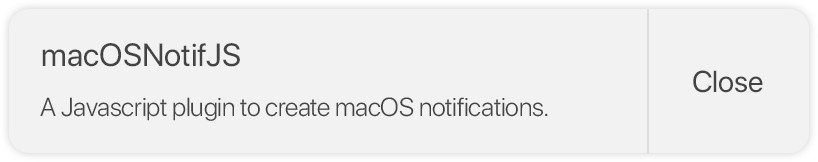
<style>
.page{position:relative;width:818px;height:162px;background:#f2f2f2}
.page>*{position:absolute;margin:0}
.t1{font:32px "SFProDisplay-Regular";color:#444444}
.t2{font:30px "SFProDisplay-Regular";color:#444444}
.t3{font:26px "SFProDisplay-Light";letter-spacing:-0.01em;color:#444444}
</style>
<div class="page">
<p class="t1" style="left:42px;top:43px;width:198px;height:24px">macOSNotifJS</p>
<p class="t2" style="left:693px;top:70px;width:70px;height:23px">Close</p>
<p class="t3" style="left:40px;top:97px;width:508px;height:24px">A Javascript plugin to create macOS notifications.</p>
</div>
